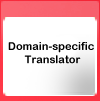
<style>
.page{position:relative;width:100px;height:101px;background:#ffffff}
.page>*{position:absolute;margin:0}
.t1{font:11px "ArialRoundedMTBold";color:#000000}
</style>
<div class="page">
<p class="t1" style="left:8px;top:42px;width:86px;height:22px;text-align:center">Domain-specific<br> Translator</p>
</div>
